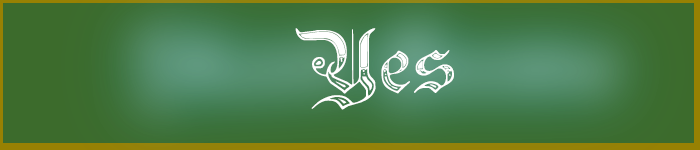
<style>
.page{position:relative;width:700px;height:150px}
.page>*{position:absolute;margin:0}
.t1{font:72px "TeutonicNo4-DemiBold";color:#ffffff}
</style>
<div class="page">
<p class="t1" style="left:295px;top:28px;width:159px;height:82px">Yes</p>
</div>
